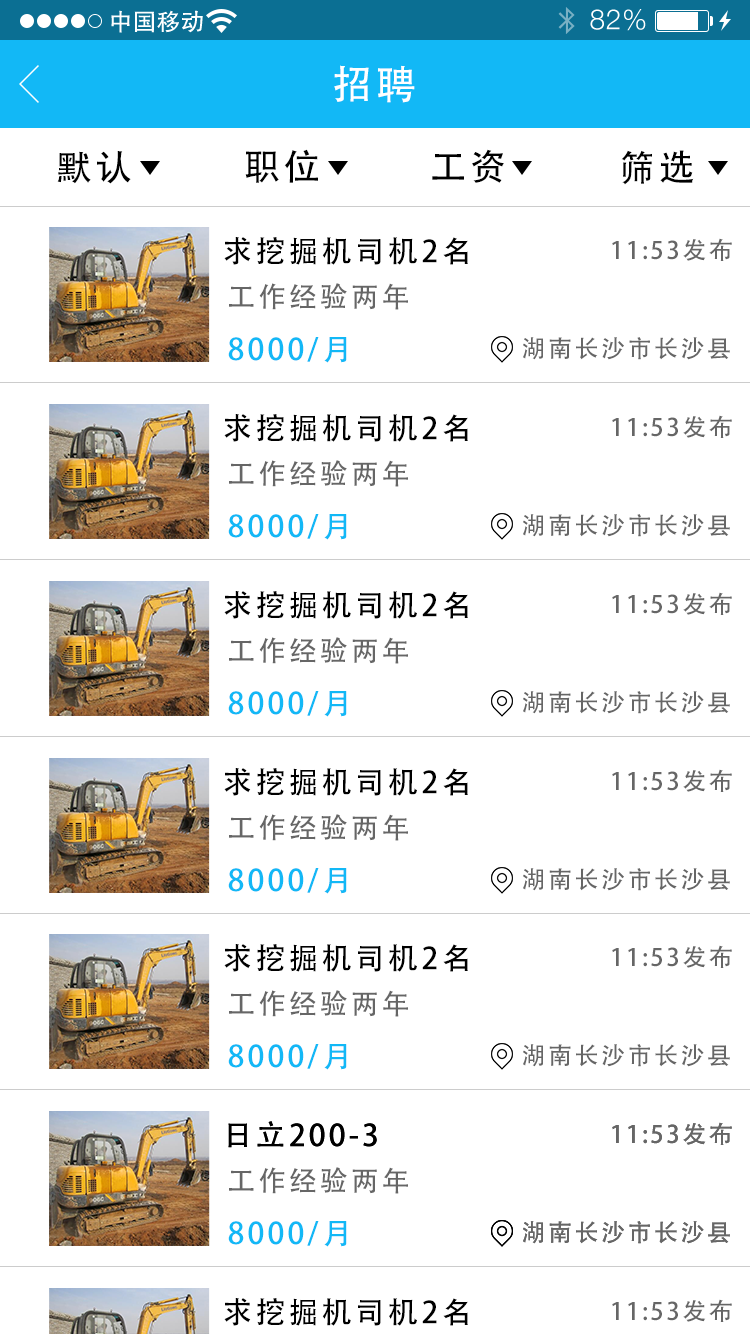
<style>
.page{position:relative;width:750px;height:1334px;background:#ffffff}
.page>*{position:absolute;margin:0}
.t1{font:40px "AdobeHeitiStd-Regular";letter-spacing:0.104em;color:#ffffff}
.t2{font:36px "AdobeHeitiStd-Regular";letter-spacing:0.104em;color:#000000}
.t3{font:30px "AdobeHeitiStd-Regular";letter-spacing:0.104em;color:#000000}
.t4{font:24px "AdobeHeitiStd-Regular";letter-spacing:0.104em;color:#666666}
.t5{font:28px "AdobeHeitiStd-Regular";letter-spacing:0.104em;color:#666666}
.t6{font:30px "AdobeHeitiStd-Regular";letter-spacing:0.104em;color:#12b8f6}
</style>
<div class="page">
<p class="t1" style="left:334px;top:65px;width:81px;height:38px">招聘</p>
<p class="t2" style="left:245px;top:149px;width:73px;height:34px">职位</p>
<p class="t2" style="left:432px;top:149px;width:72px;height:34px">工资</p>
<p class="t2" style="left:621px;top:150px;width:73px;height:35px">筛选</p>
<p class="t2" style="left:57px;top:151px;width:74px;height:33px">默认</p>
<p class="t3" style="left:224px;top:237px;width:244px;height:28px">求挖掘机司机2名</p>
<p class="t4" style="left:612px;top:238px;width:120px;height:23px">11:53发布</p>
<p class="t5" style="left:229px;top:283px;width:179px;height:27px">工作经验两年</p>
<p class="t6" style="left:228px;top:337px;width:119px;height:26px">8000/月</p>
<p class="t4" style="left:523px;top:337px;width:207px;height:23px">湖南长沙市长沙县</p>
<p class="t3" style="left:224px;top:414px;width:244px;height:28px">求挖掘机司机2名</p>
<p class="t4" style="left:612px;top:415px;width:120px;height:23px">11:53发布</p>
<p class="t5" style="left:229px;top:460px;width:179px;height:27px">工作经验两年</p>
<p class="t6" style="left:228px;top:514px;width:119px;height:26px">8000/月</p>
<p class="t4" style="left:523px;top:514px;width:207px;height:23px">湖南长沙市长沙县</p>
<p class="t3" style="left:224px;top:591px;width:244px;height:28px">求挖掘机司机2名</p>
<p class="t4" style="left:612px;top:592px;width:120px;height:23px">11:53发布</p>
<p class="t5" style="left:229px;top:637px;width:179px;height:27px">工作经验两年</p>
<p class="t6" style="left:228px;top:691px;width:119px;height:26px">8000/月</p>
<p class="t4" style="left:523px;top:691px;width:207px;height:23px">湖南长沙市长沙县</p>
<p class="t3" style="left:224px;top:768px;width:244px;height:28px">求挖掘机司机2名</p>
<p class="t4" style="left:612px;top:769px;width:120px;height:23px">11:53发布</p>
<p class="t5" style="left:229px;top:814px;width:179px;height:27px">工作经验两年</p>
<p class="t6" style="left:228px;top:868px;width:119px;height:26px">8000/月</p>
<p class="t4" style="left:523px;top:868px;width:207px;height:23px">湖南长沙市长沙县</p>
<p class="t3" style="left:224px;top:944px;width:244px;height:28px">求挖掘机司机2名</p>
<p class="t4" style="left:612px;top:945px;width:120px;height:23px">11:53发布</p>
<p class="t5" style="left:229px;top:990px;width:179px;height:27px">工作经验两年</p>
<p class="t6" style="left:228px;top:1044px;width:119px;height:26px">8000/月</p>
<p class="t4" style="left:523px;top:1044px;width:207px;height:23px">湖南长沙市长沙县</p>
<p class="t3" style="left:228px;top:1121px;width:149px;height:27px">日立200-3</p>
<p class="t3" style="left:228px;top:1121px;width:149px;height:27px">日立200-3</p>
<p class="t4" style="left:612px;top:1122px;width:120px;height:23px">11:53发布</p>
<p class="t4" style="left:612px;top:1122px;width:120px;height:23px">11:53发布</p>
<p class="t5" style="left:229px;top:1167px;width:179px;height:27px">工作经验两年</p>
<p class="t6" style="left:228px;top:1221px;width:119px;height:26px">8000/月</p>
<p class="t4" style="left:523px;top:1221px;width:207px;height:23px">湖南长沙市长沙县</p>
<p class="t4" style="left:523px;top:1221px;width:207px;height:23px">湖南长沙市长沙县</p>
<p class="t3" style="left:224px;top:1298px;width:244px;height:28px">求挖掘机司机2名</p>
<p class="t4" style="left:612px;top:1299px;width:120px;height:23px">11:53发布</p>
</div>
